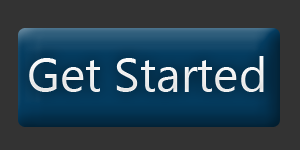
<style>
.page{position:relative;width:300px;height:150px;background:#333333}
.page>*{position:absolute;margin:0}
.t1{font:48px "SegoeUI";color:#ffffff}
</style>
<div class="page">
<p class="t1" style="left:29px;top:56px;width:235px;height:36px">Get Started</p>
</div>
